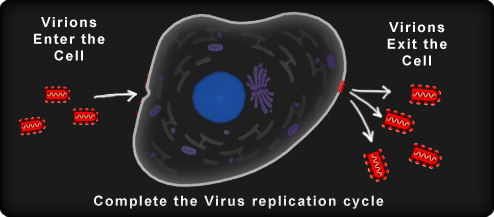
<style>
.page{position:relative;width:494px;height:217px;background:#1b1b1b}
.page>*{position:absolute;margin:0}
.t1{font:14px "Arial-BoldMT";letter-spacing:0.1em;color:#ffffff}
</style>
<div class="page">
<p class="t1" style="left:34px;top:17px;width:71px;height:44px;text-align:center">Virions<br>Enter the<br>Cell</p>
<p class="t1" style="left:387px;top:22px;width:60px;height:44px;text-align:center">Virions<br>Exit the<br>Cell</p>
<p class="t1" style="left:94px;top:195px;width:290px;height:14px">Complete the Virus replication cycle</p>
</div>
